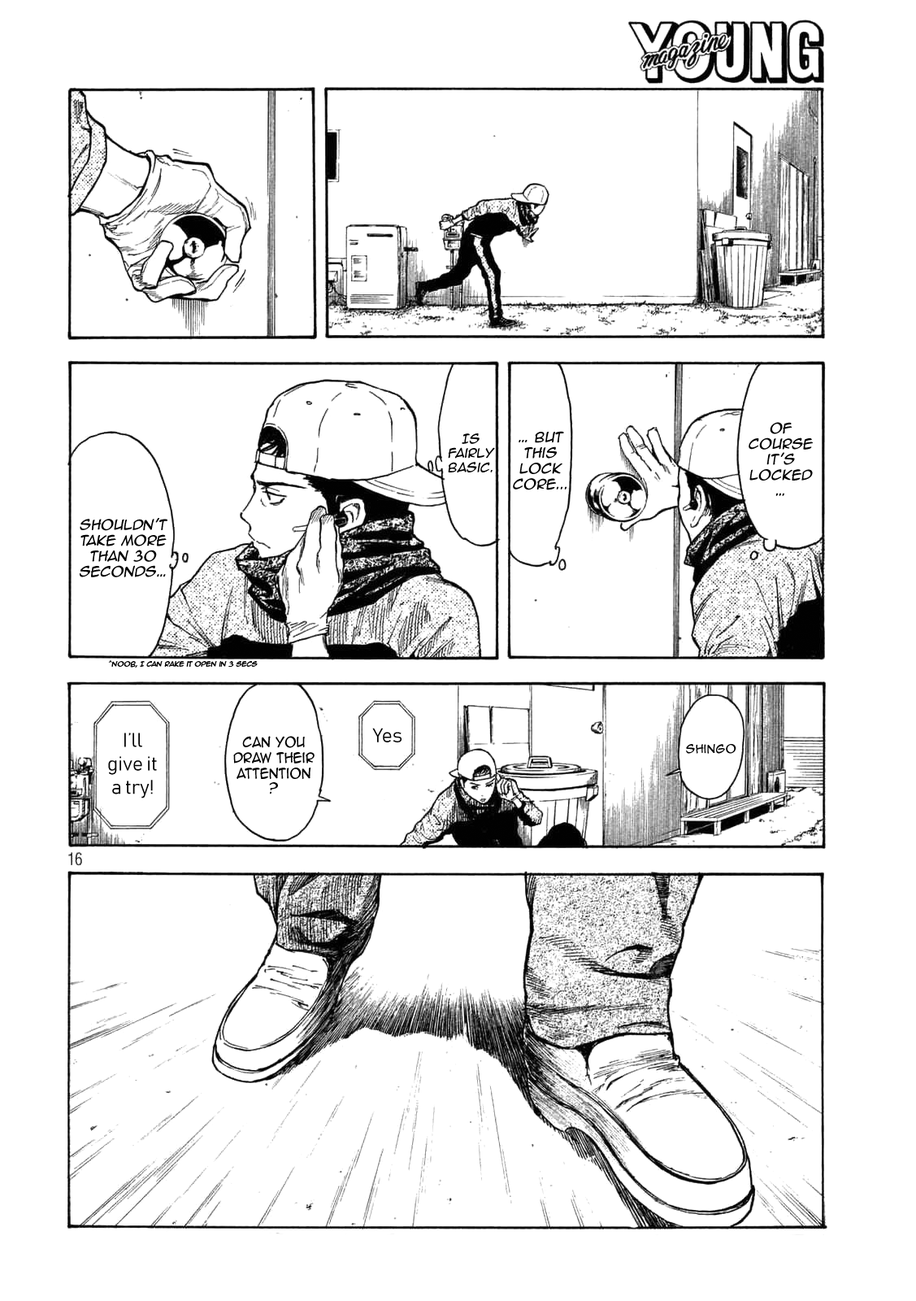
<style>
.page{position:relative;width:916px;height:1301px;background:#ffffff}
.page>*{position:absolute;margin:0}
.t1{font:13px "AnimeAce2.0BB";color:#000000;font-style:italic}
.t2{font:11.9px "AnimeAce2.0BB";color:#000000;font-style:italic}
.t3{font:6.5px "AnimeAce2.0BB";color:#000000;font-style:italic}
.t4{font:19.5px "Bahnschrift";color:#000000}
.t5{font:13px "AnimeAce2.0BB";color:#000000;scale:0.92 1}
.t6{font:10.8px "AnimeAce2.0BB";color:#000000}
</style>
<div class="page">
<p class="t1" style="left:749px;top:422px;width:64px;height:74px;text-align:center">Of course it’s locked…</p>
<p class="t2" style="left:448px;top:433px;width:47px;height:40px;text-align:center">Is <br>fairly basic.</p>
<p class="t1" style="left:513px;top:431px;width:55px;height:59px;text-align:center">… But this lock core...</p>
<p class="t1" style="left:80px;top:518px;width:88px;height:59px;text-align:center">Shouldn’t take more than 30 seconds…</p>
<p class="t3" style="left:109px;top:660px;width:149px;height:8px">^Noob, I can rake it open in 3 secs</p>
<p class="t4" style="left:108px;top:733px;width:49px;height:66px;text-align:center">I’ll <br>give it <br>a try!</p>
<p class="t5" style="left:233px;top:736px;width:82px;height:58px;text-align:center">Can you draw their attention?</p>
<p class="t4" style="left:372px;top:728px;width:30px;height:14px">Yes</p>
<p class="t6" style="left:686px;top:744px;width:51px;height:10px">Shingo</p>
</div>
